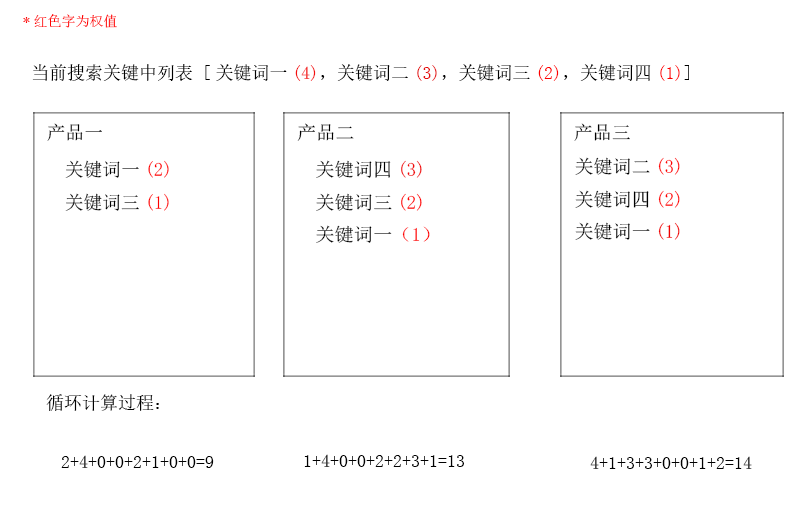
<style>
.page{position:relative;width:800px;height:520px;background:#ffffff}
.page>*{position:absolute;margin:0}
.t1{font:14px "SimSun";color:#ff0000}
.t2{font:18px "SimSun";color:#000000}
.t3{font:18px "SimSun";color:#f40f0f}
.t4{font:18px "SimSun";color:#e60d0d}
.t5{font:18px "SimSun";color:#fe0000}
.t6{font:18px "SimSun";color:#ff0000}
.t7{font:18.7px "SimSun";color:#000000}
.t8{font:18.7px "SimSun"}
</style>
<div class="page">
<p class="t1" style="left:23px;top:14px;width:94px;height:14px">*红色字为权值</p>
<p class="t2" style="left:32px;top:64px;width:657px;height:17px">当前搜索关键中列表 [关键词一<span class="t3">(4)</span>，关键词二<span class="t4">(3)</span>，关键词三<span class="t5">(2)</span>，关键词四<span class="t6">(1)</span>]</p>
<p class="t7" style="left:47px;top:123px;width:55px;height:18px">产品一</p>
<p class="t7" style="left:297px;top:123px;width:57px;height:18px">产品二</p>
<p class="t7" style="left:574px;top:123px;width:56px;height:18px">产品三</p>
<p class="t8" style="left:65px;top:160px;width:104px;height:51px">关键词一(2)<br>关键词三(1)</p>
<p class="t7" style="left:316px;top:160px;width:114px;height:83px">关键词四(3)<br>关键词三(2)<br>关键词一（1）</p>
<p class="t7" style="left:575px;top:157px;width:105px;height:83px">关键词二(3)<br>关键词四(2)<br>关键词一(1)</p>
<p class="t2" style="left:46px;top:394px;width:113px;height:17px">循环计算过程：</p>
<p class="t2" style="left:61px;top:455px;width:153px;height:13px">2+4+0+0+2+1+0+0=9</p>
<p class="t2" style="left:304px;top:454px;width:160px;height:13px">1+4+0+0+2+2+3+1=13</p>
<p class="t2" style="left:590px;top:456px;width:162px;height:13px">4+1+3+3+0+0+1+2=14</p>
</div>
